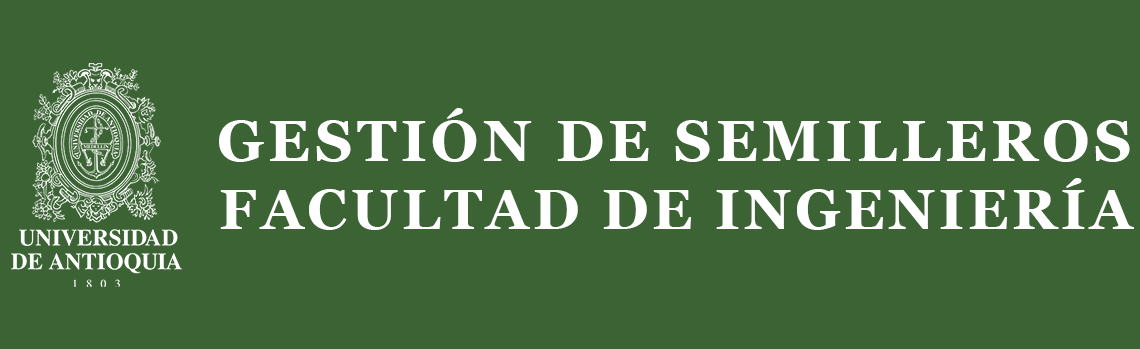
<style>
.page{position:relative;width:1140px;height:349px;background:#3b6333}
.page>*{position:absolute;margin:0}
.t1{font:58.2px "Georgia-Bold";letter-spacing:0.075em;color:#ffffff}
.t2{font:55.7px "Georgia-Bold";letter-spacing:0.075em;color:#ffffff}
</style>
<div class="page">
<p class="t1" style="left:219px;top:108px;width:911px;height:54px">GESTIÓN DE SEMILLEROS</p>
<p class="t2" style="left:220px;top:178px;width:914px;height:52px">FACULTAD DE INGENIERÍA</p>
</div>
